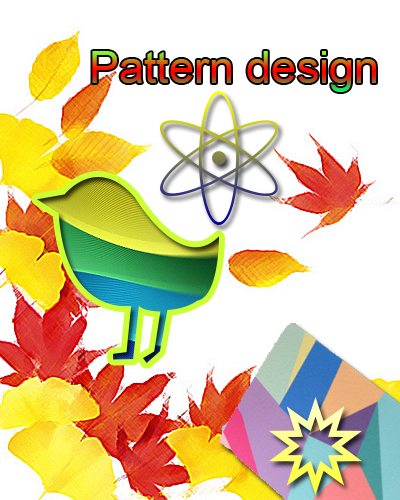
<style>
.page{position:relative;width:400px;height:500px;background:#ffffff}
.page>*{position:absolute;margin:0}
.t1{font:44.8px "ArialMT"}
</style>
<div class="page">
<p class="t1" style="left:92px;top:51px;width:284px;height:41px">Pattern design</p>
</div>
